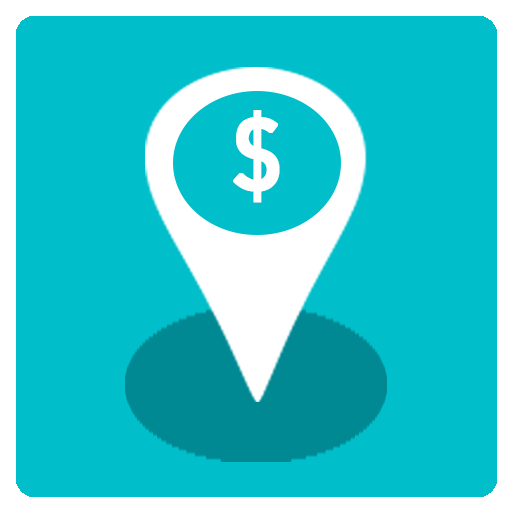
<style>
.page{position:relative;width:512px;height:512px;background:#00beca}
.page>*{position:absolute;margin:0}
.t1{font:100px "DINAlternate-Bold";color:#ffffff;font-weight:bold}
</style>
<div class="page">
<p class="t1" style="left:233px;top:110px;width:47px;height:93px">$</p>
</div>
